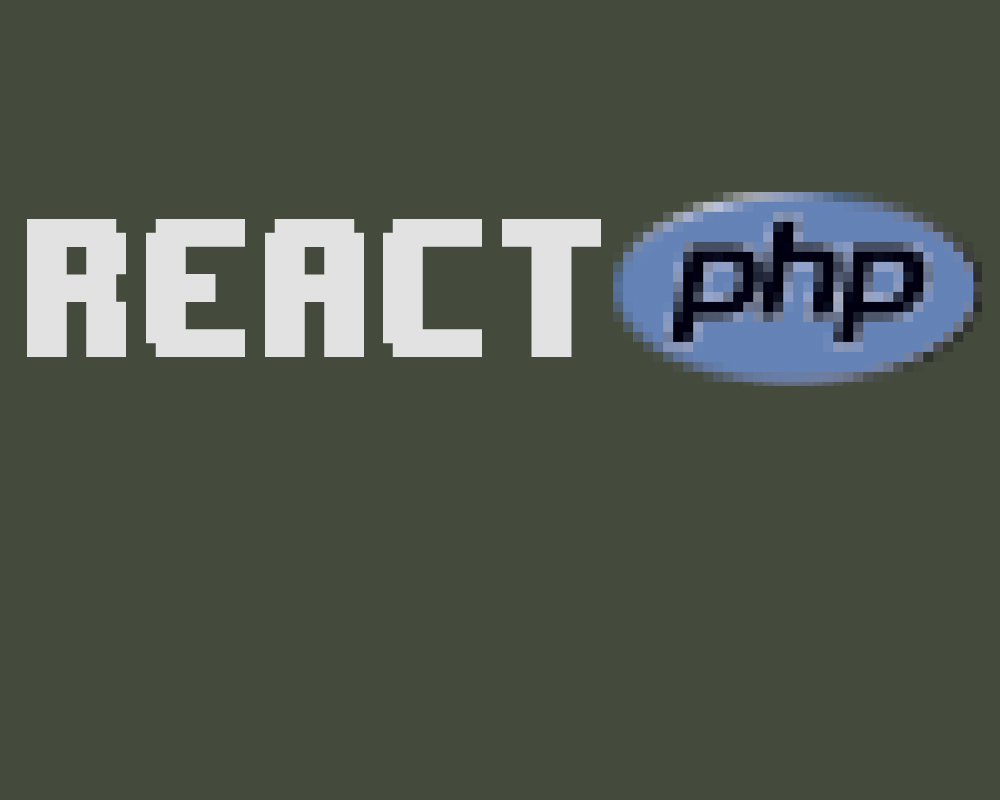
<style>
.page{position:relative;width:1000px;height:800px;background:#444b3d}
.page>*{position:absolute;margin:0}
.t1{font:165px "8BITWONDERNominal";color:#e2e2e2;scale:0.72 1}
</style>
<div class="page">
<p class="t1" style="left:27px;top:219px;width:574px;height:138px">react</p>
</div>
